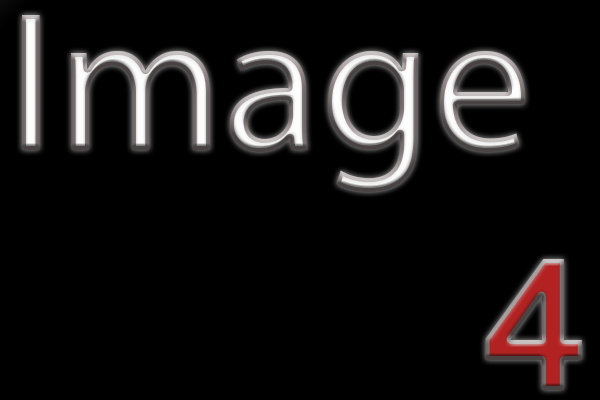
<style>
.page{position:relative;width:600px;height:400px;background:#000000}
.page>*{position:absolute;margin:0}
.t1{font:200px "MyriadPro-Regular"}
.t2{font:200px "MyanmarSangamMN-Bold"}
</style>
<div class="page">
<p class="t1" style="left:22px;top:15px;width:560px;height:375px">Image<br>             <span class="t2">4</span></p>
</div>
